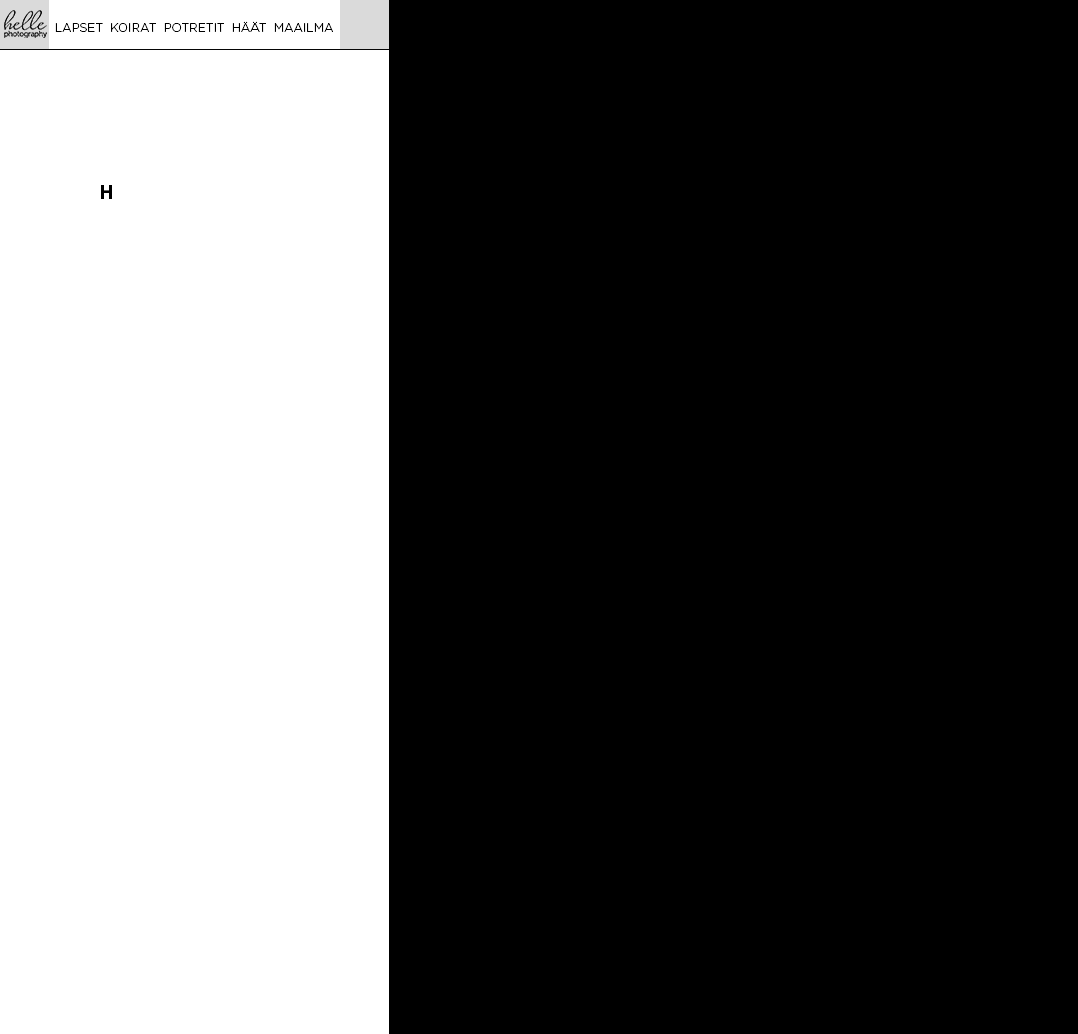
<style>
.page{position:relative;width:1078px;height:1034px;background:#000000}
.page>*{position:absolute;margin:0}
.t1{font:12px "Gotham-Light";color:#000000}
.t2{font:20px "Gotham-Bold";color:#000000}
</style>
<div class="page">
<p class="t1" style="left:55px;top:21px;width:278px;height:11px">LAPSET  KOIRAT  POTRETIT  HÄÄT  MAAILMA</p>
<p class="t2" style="left:101px;top:185px;width:11px;height:14px">H</p>
</div>
